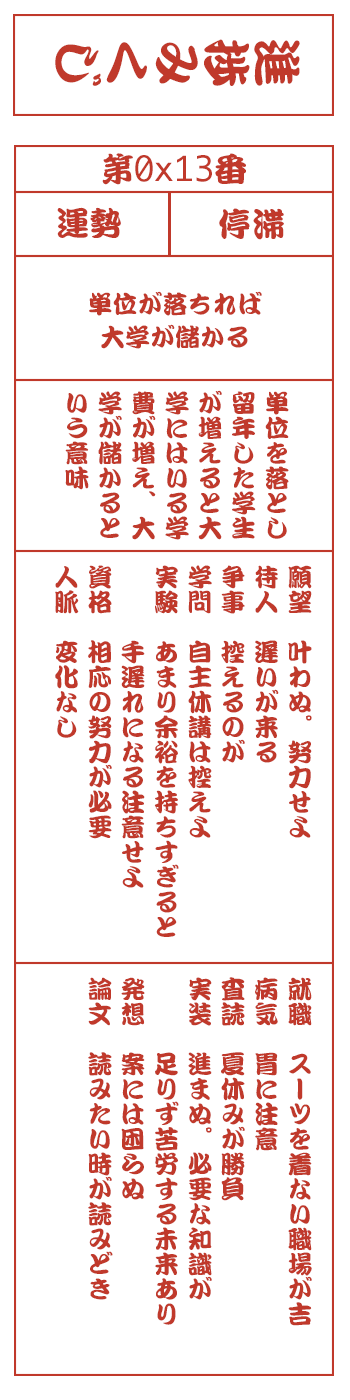
<style>
.page{position:relative;width:350px;height:1400px;background:#ffffff}
.page>*{position:absolute;margin:0}
.t1{font:50px "DFKanTeiRyu-XB-MP-RKSJ-H";color:#c0392b}
.t2{font:33.3px "Monaco";color:#c0392b}
.t3{font:33.3px "DFKanTeiRyu-XB-MP-RKSJ-H";color:#c0392b}
.t4{font:25px/33.3px "DFKanTeiRyu-XB-MP-RKSJ-H";color:#c0392b}
</style>
<div class="page">
<p class="t1" style="left:55px;top:39px;width:245px;height:47px;rotate:90deg">進捗みくじ</p>
<p class="t2" style="left:102px;top:153px;width:144px;height:32px"><span class="t3">第</span>0x13<span class="t3">番</span></p>
<p class="t3" style="left:57px;top:207px;width:64px;height:31px">運勢</p>
<p class="t3" style="left:219px;top:208px;width:65px;height:32px">停滞</p>
<p class="t4" style="left:89px;top:291px;width:173px;height:58px;text-align:center">単位が落ちれば<br>大学が儲かる</p>
<p class="t4" style="left:65px;top:390px;width:224px;height:150px">単位を落とし<br>留年した学生<br>が増えると大<br>学にはいる学<br>費が増え、大<br>学が儲かると<br>いう意味</p>
<p class="t4" style="left:55px;top:565px;width:257px;height:372px">願望　叶わぬ。努力せよ<br>待人　遅いが来る<br>争事　控えるのが<br>学問　自主休講は控えよ<br>実験　あまり余裕を持ちすぎると<br>　　　手遅れになる注意せよ<br>資格　相応の努力が必要<br>人脈　変化なし</p>
<p class="t4" style="left:88px;top:977px;width:224px;height:349px">就職　スーツを着ない職場が吉<br>病気　胃に注意<br>査読　夏休みが勝負<br>実装　進まぬ。必要な知識が<br>　　　足りず苦労する未来あり<br>発想　案には困らぬ<br>論文　読みたい時が読みどき</p>
</div>
